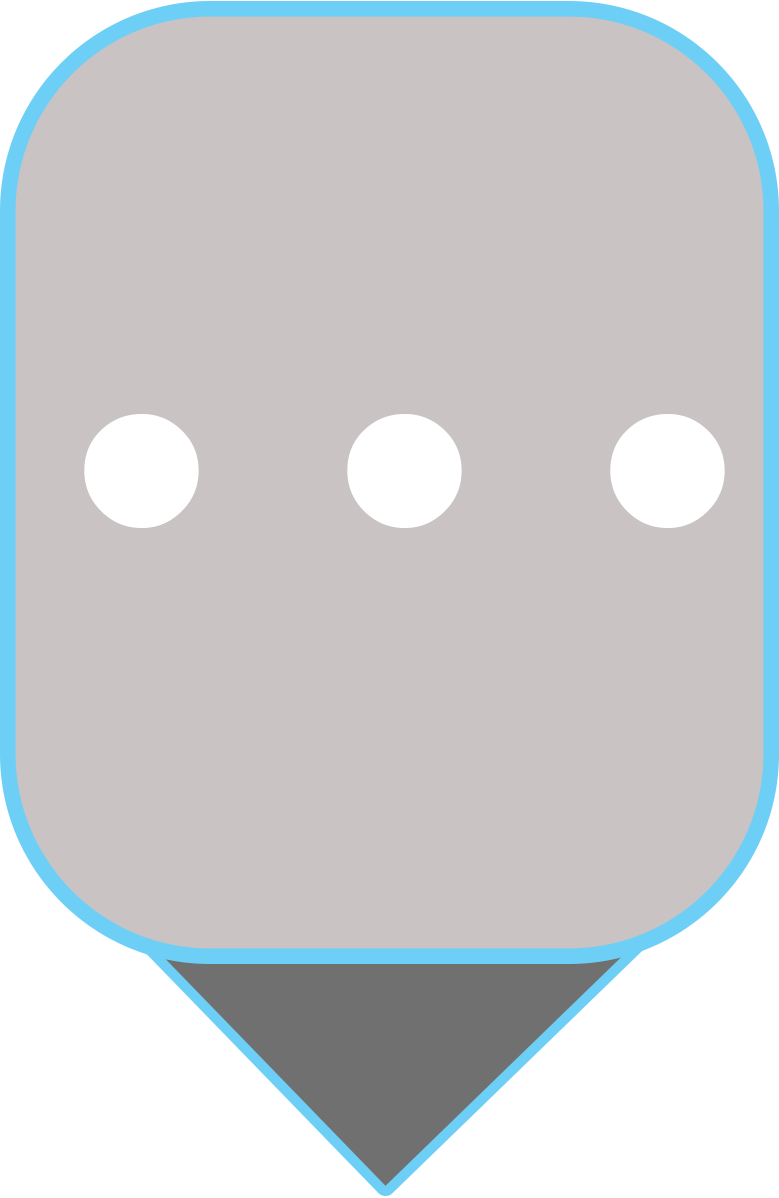
<style>
.page{position:relative;width:779px;height:1198px;background:#c9c3c3}
.page>*{position:absolute;margin:0}
.t1{font:1570.3px "Microsoft-Himalaya";color:#ffffff}
</style>
<div class="page">
<p class="t1" style="left:84px;top:414px;width:641px;height:114px">...</p>
</div>
